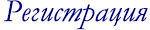
<style>
.page{position:relative;width:150px;height:30px;background:#ffffff}
.page>*{position:absolute;margin:0}
.t1{font:32px "Garamond-Italic";color:#00008b}
</style>
<div class="page">
<p class="t1" style="left:4px;top:0px;width:144px;height:30px">Регистрация</p>
</div>
